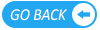
<style>
.page{position:relative;width:100px;height:30px;background:#22a7f0}
.page>*{position:absolute;margin:0}
.t1{font:16.7px "Calibri-Italic";color:#ffffff;scale:0.92 1}
</style>
<div class="page">
<p class="t1" style="left:10px;top:9px;width:57px;height:12px">GO BACK</p>
</div>
